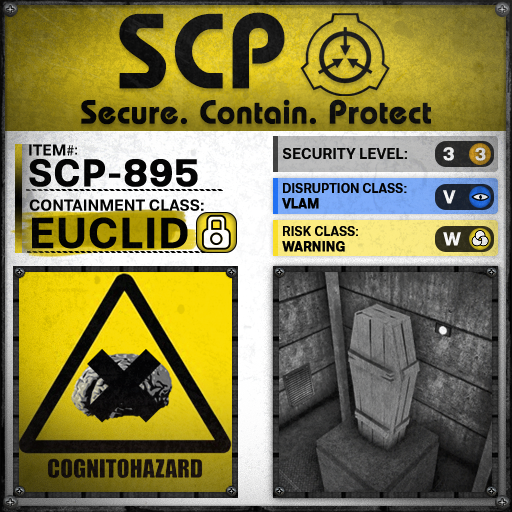
<style>
.page{position:relative;width:512px;height:512px}
.page>*{position:absolute;margin:0}
.t1{font:105.8px "BauhausLT-Demi";color:#000000;font-weight:bold}
.t2{font:33px "BauhausLT-Demi";color:#000000;font-weight:bold}
.t3{font:15.7px "Molde-Semibold";color:#000000}
.t4{font:15.7px "MyriadPro-Regular";color:#000000}
.t5{font:13.7px "Molde-Semibold";color:#000000}
.t6{font:15px "Molde-Semibold";color:#000000}
.t7{font:18.6px "Molde-Semibold";color:#ffffff;font-weight:bold}
.t8{font:17.8px "Molde-Semibold";color:#d6d7d7;font-weight:bold}
.t9{font:38.2px "Molde-Semibold";color:#000000;font-weight:bold}
.t10{font:12.8px "Molde-Semibold";color:#000000}
.t11{font:12.8px "Molde-Semibold";color:#000000;font-weight:bold}
.t12{font:15.9px "Molde-Semibold";color:#000000}
.t13{font:42.8px "Molde-Semibold";color:#000000;font-weight:bold}
</style>
<div class="page">
<p class="t1" style="left:119px;top:12px;width:166px;height:77px">SCP</p>
<p class="t2" style="left:81px;top:99px;width:350px;height:26px">Secure. Contain. Protect</p>
<p class="t3" style="left:29px;top:144px;width:45px;height:12px">ITEM<span class="t4">#</span></p>
<p class="t5" style="left:75px;top:147px;width:2px;height:8px">:</p>
<p class="t6" style="left:283px;top:148px;width:124px;height:11px">SECURITY LEVEL:</p>
<p class="t7" style="left:443px;top:147px;width:11px;height:14px">3</p>
<p class="t8" style="left:475px;top:147px;width:11px;height:14px">3</p>
<p class="t9" style="left:29px;top:159px;width:169px;height:28px">SCP-895</p>
<p class="t10" style="left:282px;top:183px;width:125px;height:26px">DISRUPTION CLASS:<br><span class="t11">VLAM</span></p>
<p class="t7" style="left:443px;top:190px;width:13px;height:14px">V</p>
<p class="t12" style="left:29px;top:199px;width:175px;height:12px">CONTAINMENT CLASS:</p>
<p class="t13" style="left:32px;top:217px;width:156px;height:32px">EUCLID</p>
<p class="t10" style="left:282px;top:226px;width:76px;height:26px">RISK CLASS:<br><span class="t11">WARNING</span></p>
<p class="t7" style="left:443px;top:232px;width:18px;height:14px">W</p>
</div>
